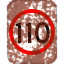
<style>
.page{position:relative;width:64px;height:64px;background:#ffffff}
.page>*{position:absolute;margin:0}
.t1{font:36px "Roadgeek2014SeriesD";color:#4e1b0d}
</style>
<div class="page">
<p class="t1" style="left:16px;top:22px;width:34px;height:22px">110</p>
</div>
